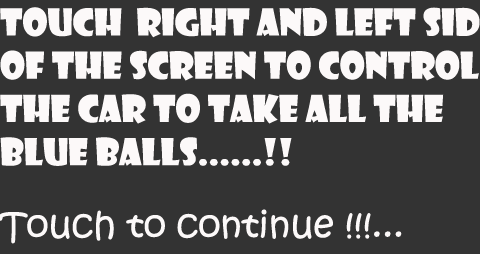
<style>
.page{position:relative;width:480px;height:254px;background:#333333}
.page>*{position:absolute;margin:0}
.t1{font:36px "ShowcardGothic-Reg";color:#fcf9f9}
.t2{font:36px "KristenITC-Regular";color:#fcf9f9}
</style>
<div class="page">
<p class="t1" style="left:0px;top:7px;width:480px;height:159px">Touch  Right and left sid<br>of the screen to control <br>the car to take all the blue balls......!!</p>
<p class="t2" style="left:0px;top:209px;width:402px;height:35px">Touch to continue !!!...</p>
</div>
